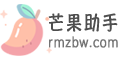
<style>
.page{position:relative;width:120px;height:60px;background:#ffffff}
.page>*{position:absolute;margin:0}
.t1{font:19.2px "HannotateSC-W7";letter-spacing:0.1em;color:#4e4e4e;font-weight:bold;scale:0.83 1}
.t2{font:14.4px "STYuanti-SC-Regular";letter-spacing:0.05em;color:#747474;font-weight:bold;scale:0.83 1}
</style>
<div class="page">
<p class="t1" style="left:48px;top:13px;width:70px;height:19px">芒果助手</p>
<p class="t2" style="left:49px;top:36px;width:69px;height:12px">rmzbw.com</p>
</div>
